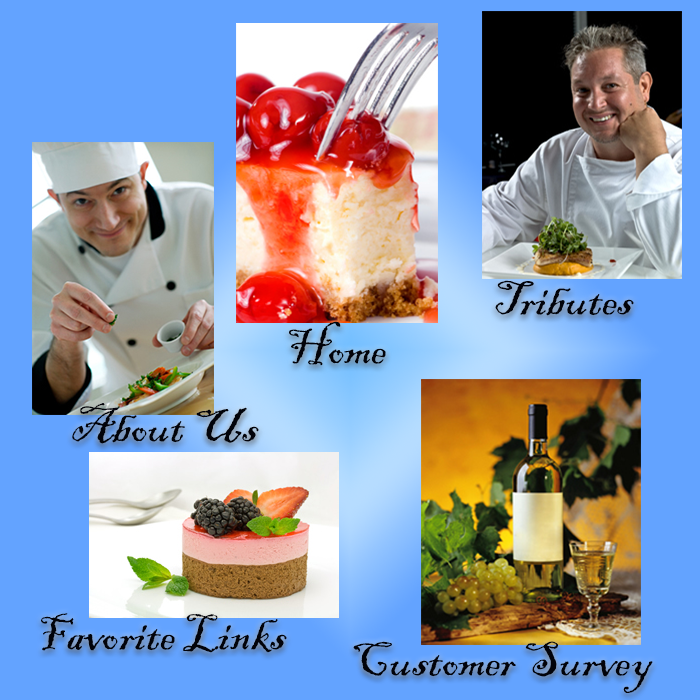
<style>
.page{position:relative;width:700px;height:700px;background:#63a3ff}
.page>*{position:absolute;margin:0}
.t1{font:50px "BlackadderITC-Regular";color:#02030a}
</style>
<div class="page">
<p class="t1" style="left:495px;top:280px;width:139px;height:36px">Tributes</p>
<p class="t1" style="left:289px;top:321px;width:97px;height:45px">Home</p>
<p class="t1" style="left:72px;top:403px;width:187px;height:41px">About Us</p>
<p class="t1" style="left:41px;top:613px;width:246px;height:40px">Favorite Links</p>
<p class="t1" style="left:353px;top:641px;width:300px;height:52px">Customer Survey</p>
</div>
